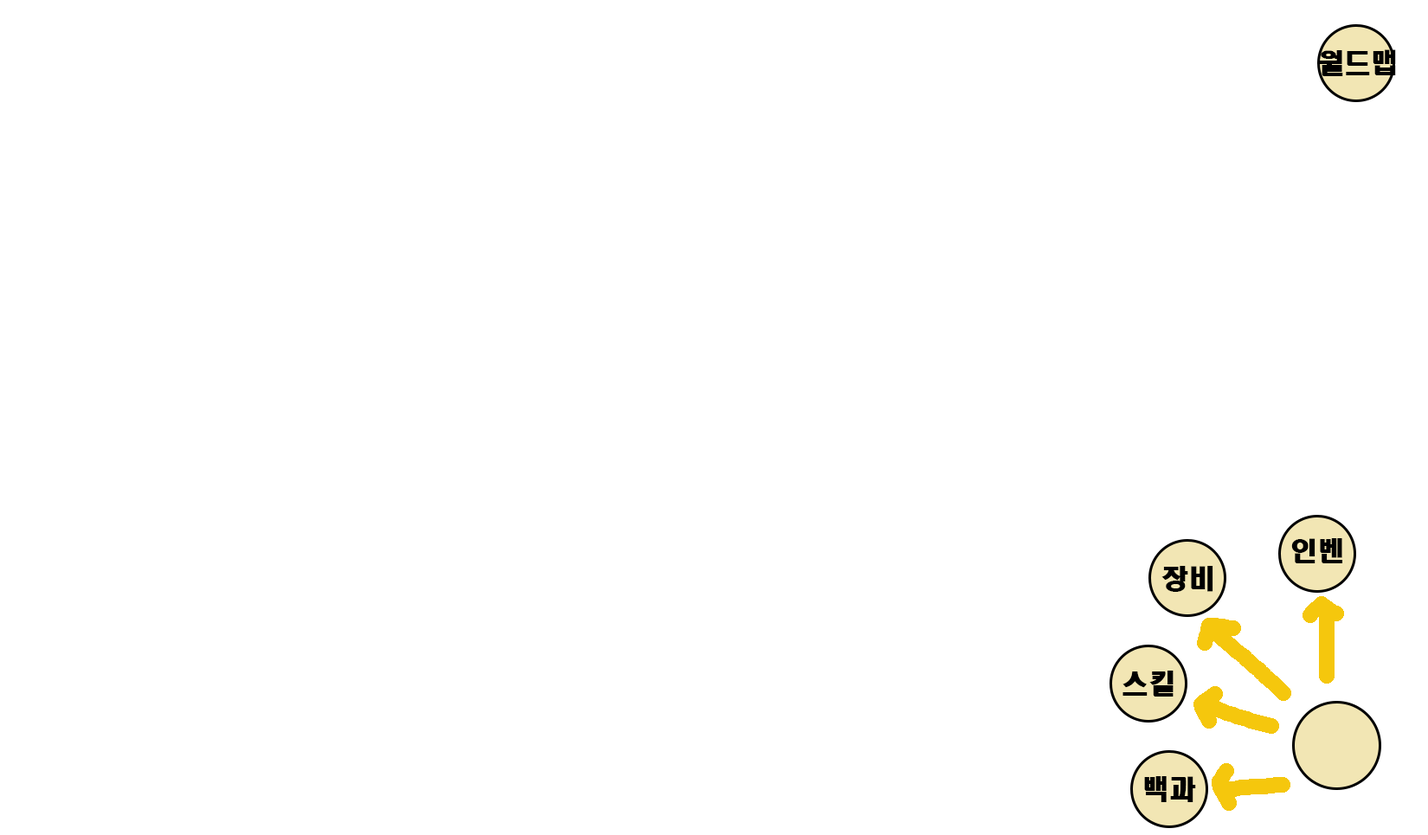
<style>
.page{position:relative;width:1428px;height:835px;background:#ffffff}
.page>*{position:absolute;margin:0}
.t1{font:26.8px "HeadlineR-HM";color:#000000}
</style>
<div class="page">
<p class="t1" style="left:1320px;top:49px;width:76px;height:27px">월드맵</p>
<p class="t1" style="left:1291px;top:538px;width:51px;height:25px">인벤</p>
<p class="t1" style="left:1161px;top:566px;width:52px;height:26px">장비</p>
<p class="t1" style="left:1122px;top:671px;width:51px;height:26px">스킬</p>
<p class="t1" style="left:1144px;top:776px;width:52px;height:26px">백과</p>
</div>
